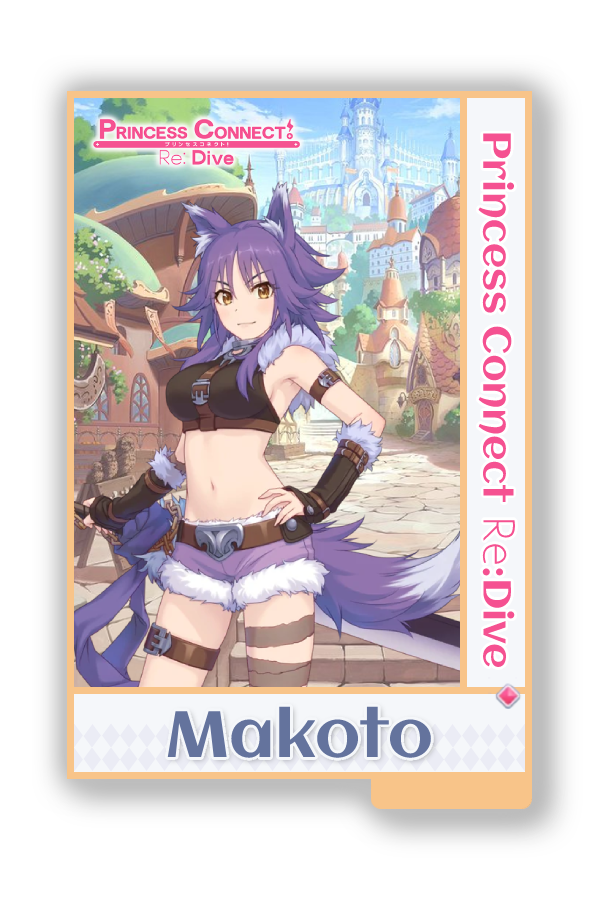
<style>
.page{position:relative;width:600px;height:900px;background:#ffffff}
.page>*{position:absolute;margin:0}
.t1{font:39px "Aclonica-Regular";color:#f55191}
.t2{font:39px "AaarghNormal";color:#f55191}
.t3{font:65px "Aclonica-Regular";color:#64739d}
</style>
<div class="page">
<p class="t1" style="left:478px;top:133px;width:38px;height:534px;rotate:90deg">Princess Connect <span class="t2">Re</span>:Dive</p>
<p class="t3" style="left:167px;top:706px;width:264px;height:52px">Makoto</p>
</div>
